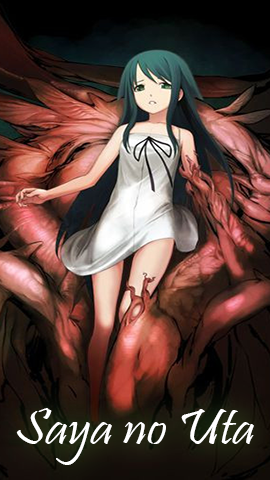
<style>
.page{position:relative;width:270px;height:480px}
.page>*{position:absolute;margin:0}
.t1{font:51px "Pristina-Regular";color:#ffffff;scale:1.11 1}
</style>
<div class="page">
<p class="t1" style="left:16px;top:408px;width:238px;height:57px">Saya no Uta</p>
</div>
